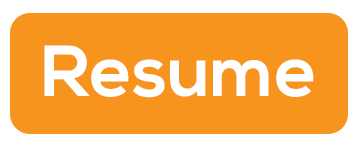
<style>
.page{position:relative;width:360px;height:150px;background:#f7941d}
.page>*{position:absolute;margin:0}
.t1{font:72px "NexaBold";color:#ffffff}
</style>
<div class="page">
<p class="t1" style="left:44px;top:45px;width:270px;height:53px">Resume</p>
</div>
